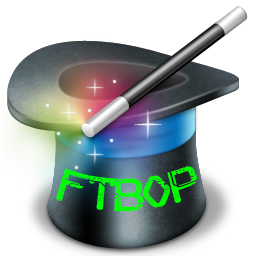
<style>
.page{position:relative;width:256px;height:256px;background:#ffffff}
.page>*{position:absolute;margin:0}
.t1{font:38.4px "Circuit";color:#00ff00;scale:1.06 1}
</style>
<div class="page">
<p class="t1" style="left:56px;top:166px;width:141px;height:46px;rotate:-16deg">FTBOP</p>
</div>
